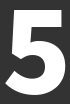
<style>
.page{position:relative;width:70px;height:104px;background:#333333}
.page>*{position:absolute;margin:0}
.t1{font:130.9px "SourceSansPro-Bold";letter-spacing:-0.05em;color:#ffffff}
</style>
<div class="page">
<p class="t1" style="left:5px;top:10px;width:61px;height:85px">5</p>
</div>
